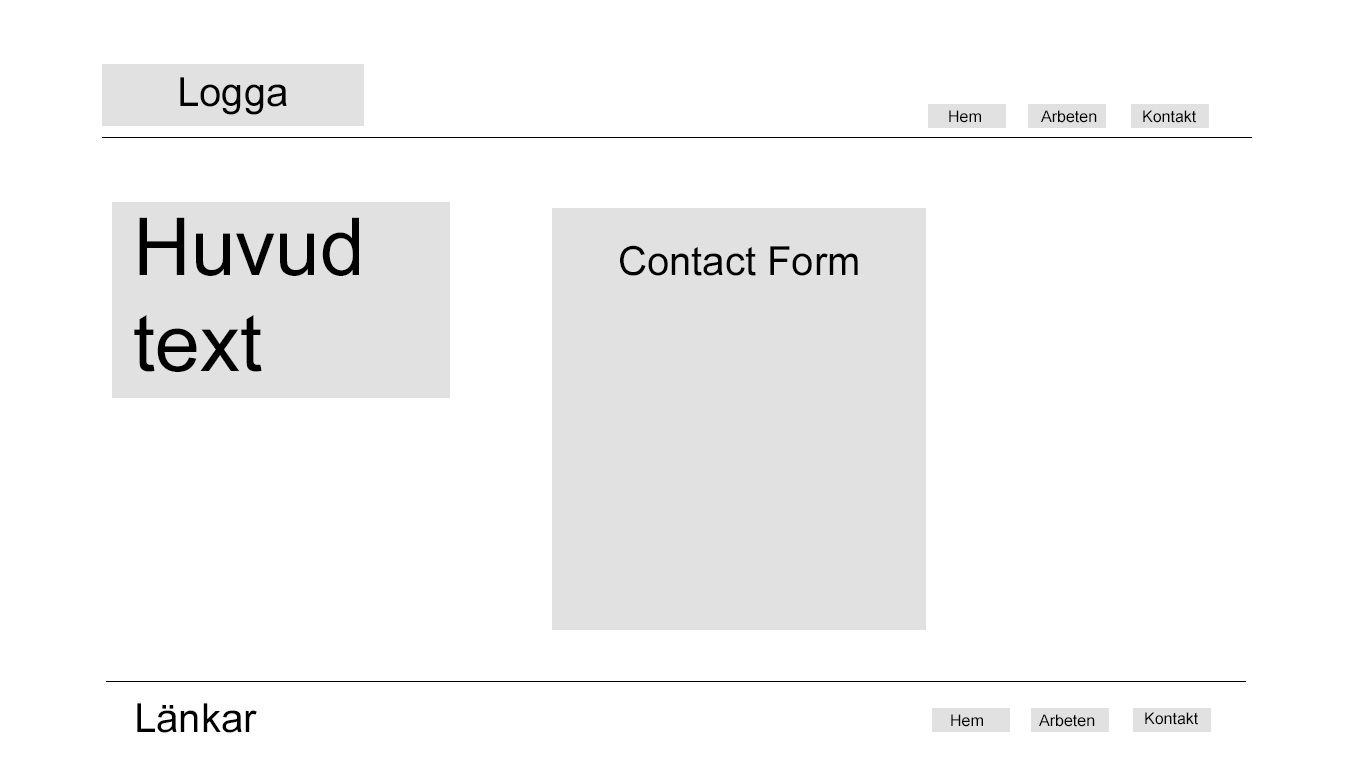
<style>
.page{position:relative;width:1366px;height:768px;background:#ffffff}
.page>*{position:absolute;margin:0}
.t1{font:40px "ArialMT";color:#000000}
.t2{font:16px "ArialMT";color:#000000}
.t3{font:80px "ArialMT";color:#000000}
</style>
<div class="page">
<p class="t1" style="left:180px;top:77px;width:107px;height:38px">Logga</p>
<p class="t2" style="left:949px;top:110px;width:32px;height:13px">Hem</p>
<p class="t2" style="left:1041px;top:110px;width:56px;height:13px">Arbeten</p>
<p class="t2" style="left:1143px;top:110px;width:53px;height:13px">Kontakt</p>
<p class="t3" style="left:134px;top:217px;width:225px;height:155px">Huvud text</p>
<p class="t1" style="left:620px;top:245px;width:238px;height:31px">Contact Form</p>
<p class="t1" style="left:137px;top:703px;width:120px;height:30px">Länkar</p>
<p class="t2" style="left:1145px;top:712px;width:53px;height:13px">Kontakt</p>
<p class="t2" style="left:951px;top:714px;width:32px;height:13px">Hem</p>
<p class="t2" style="left:1039px;top:714px;width:56px;height:13px">Arbeten</p>
</div>
